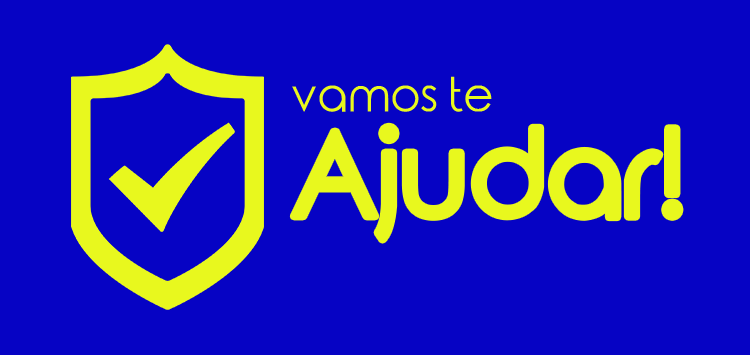
<style>
.page{position:relative;width:750px;height:355px;background:#0603c4}
.page>*{position:absolute;margin:0}
.t1{font:46.9px "RoundedElegance-Regular";letter-spacing:-0.02em;color:#e8f81e}
.t2{font:117.2px "RoundedElegance-Regular";letter-spacing:-0.02em;color:#e8f81e}
</style>
<div class="page">
<p class="t1" style="left:292px;top:76px;width:200px;height:36px">vamos te</p>
<p class="t2" style="left:293px;top:126px;width:387px;height:114px"><span class="t1"><br></span>Ajudar!</p>
</div>
